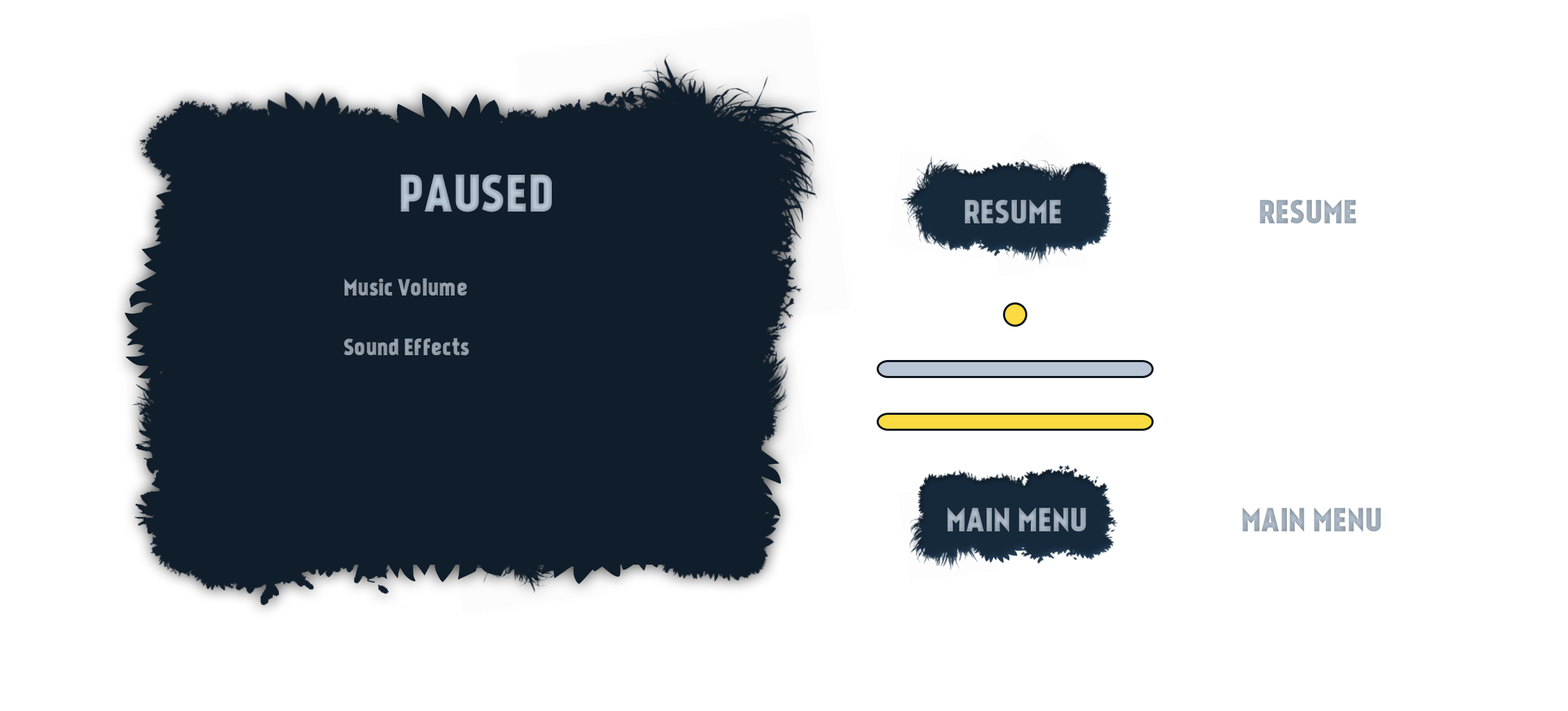
<style>
.page{position:relative;width:1568px;height:711px;background:#ffffff}
.page>*{position:absolute;margin:0}
.t1{font:50px "Kankin";letter-spacing:0.01em;color:#aab7c5}
.t2{font:31.7px "Kankin";letter-spacing:0.01em;color:#9fabb8}
.t3{font:22.2px "Kankin";letter-spacing:0.01em;color:#8f9aa6}
.t4{font:22.2px "Kankin";letter-spacing:0.01em;color:#919ca8}
.t5{font:31.7px "Kankin";letter-spacing:0.01em;color:#9eaab7}
</style>
<div class="page">
<p class="t1" style="left:401px;top:174px;width:151px;height:38px">PAUSED</p>
<p class="t2" style="left:965px;top:199px;width:96px;height:25px">RESUME</p>
<p class="t2" style="left:1260px;top:199px;width:96px;height:25px">RESUME</p>
<p class="t3" style="left:344px;top:278px;width:123px;height:18px">Music Volume</p>
<p class="t4" style="left:344px;top:338px;width:125px;height:18px">Sound Effects</p>
<p class="t5" style="left:947px;top:507px;width:139px;height:25px">MAIN MENU</p>
<p class="t5" style="left:1242px;top:507px;width:139px;height:25px">MAIN MENU</p>
</div>
